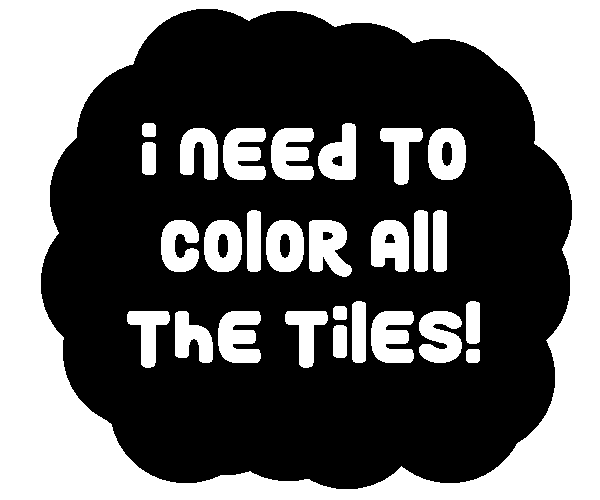
<style>
.page{position:relative;width:600px;height:500px;background:#000000}
.page>*{position:absolute;margin:0}
.t1{font:76.4px "RoundyRainbows";color:#ffffff}
</style>
<div class="page">
<p class="t1" style="left:127px;top:123px;width:353px;height:245px;text-align:center">I Need To Color All The Tiles!</p>
</div>
